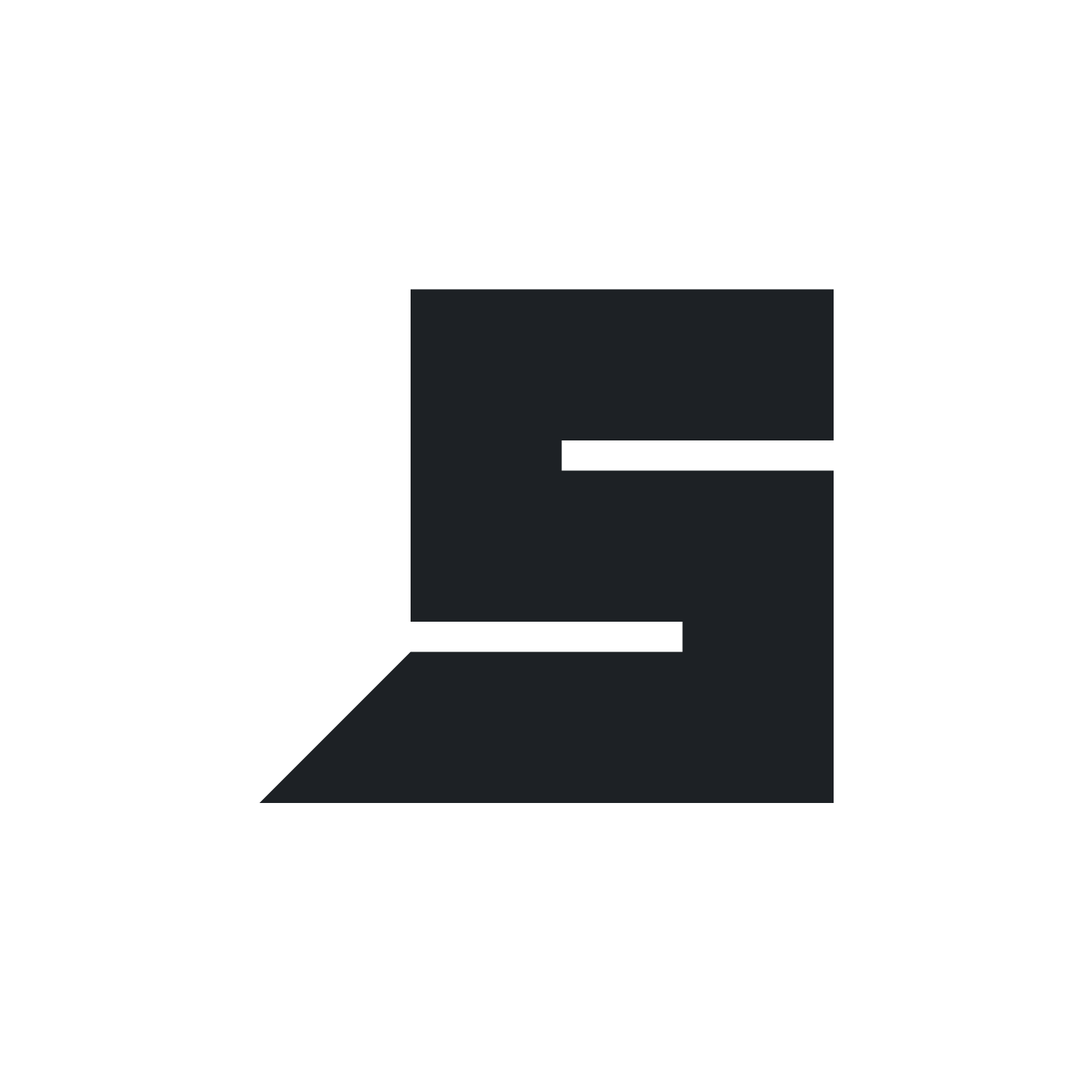
<style>
.page{position:relative;width:1092px;height:1092px;background:#ffffff}
.page>*{position:absolute;margin:0}
.t1{font:618.8px "SheepingCatsStraight";color:#1d2125}
</style>
<div class="page">
<p class="t1" style="left:259px;top:289px;width:575px;height:514px">S</p>
</div>
